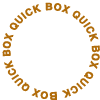
<style>
.page{position:relative;width:100px;height:100px;background:#ffffff}
.page>*{position:absolute;margin:0}
.t1{font:9.3px/13.5px "H2gtrE";letter-spacing:-0.02em;color:#b06c0b;font-weight:bold;scale:1.05 1}
.t2{font:10.1px/13.5px "H2gtrE";letter-spacing:-0.02em;color:#b06c0b;font-weight:bold;scale:1.05 1}
</style>
<div class="page">
<p class="t1" style="left:2px;top:2px;width:98px;height:99px;text-align:justify"><span class="t2"> B</span>OX QUICK BOX QUICK BOX QUICK BOX QUICK</p>
</div>
